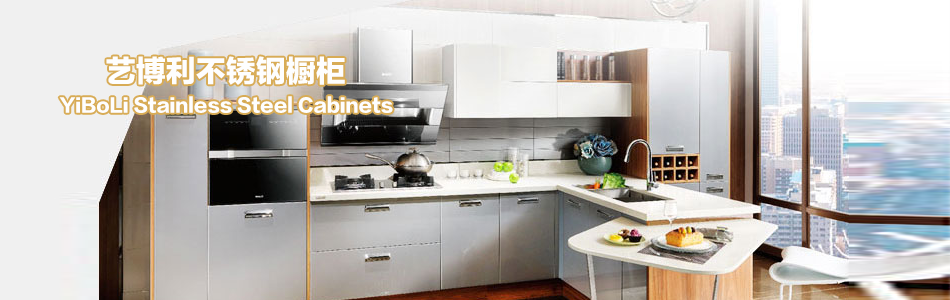
<style>
.page{position:relative;width:950px;height:300px}
.page>*{position:absolute;margin:0}
.t1{font:30px "FZLTTHK--GBK1-0";color:#fefefe}
.t2{font:18px "FZLTTHK--GBK1-0";color:#fefefe}
</style>
<div class="page">
<p class="t1" style="left:106px;top:56px;width:239px;height:29px">艺博利不锈钢橱柜</p>
<p class="t2" style="left:59px;top:96px;width:334px;height:17px">YiBoLi Stainless Steel Cabinets</p>
</div>
